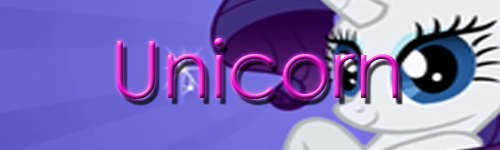
<style>
.page{position:relative;width:500px;height:150px}
.page>*{position:absolute;margin:0}
.t1{font:80px "CenturyGothic"}
</style>
<div class="page">
<p class="t1" style="left:117px;top:38px;width:282px;height:61px">Unicorn</p>
</div>
